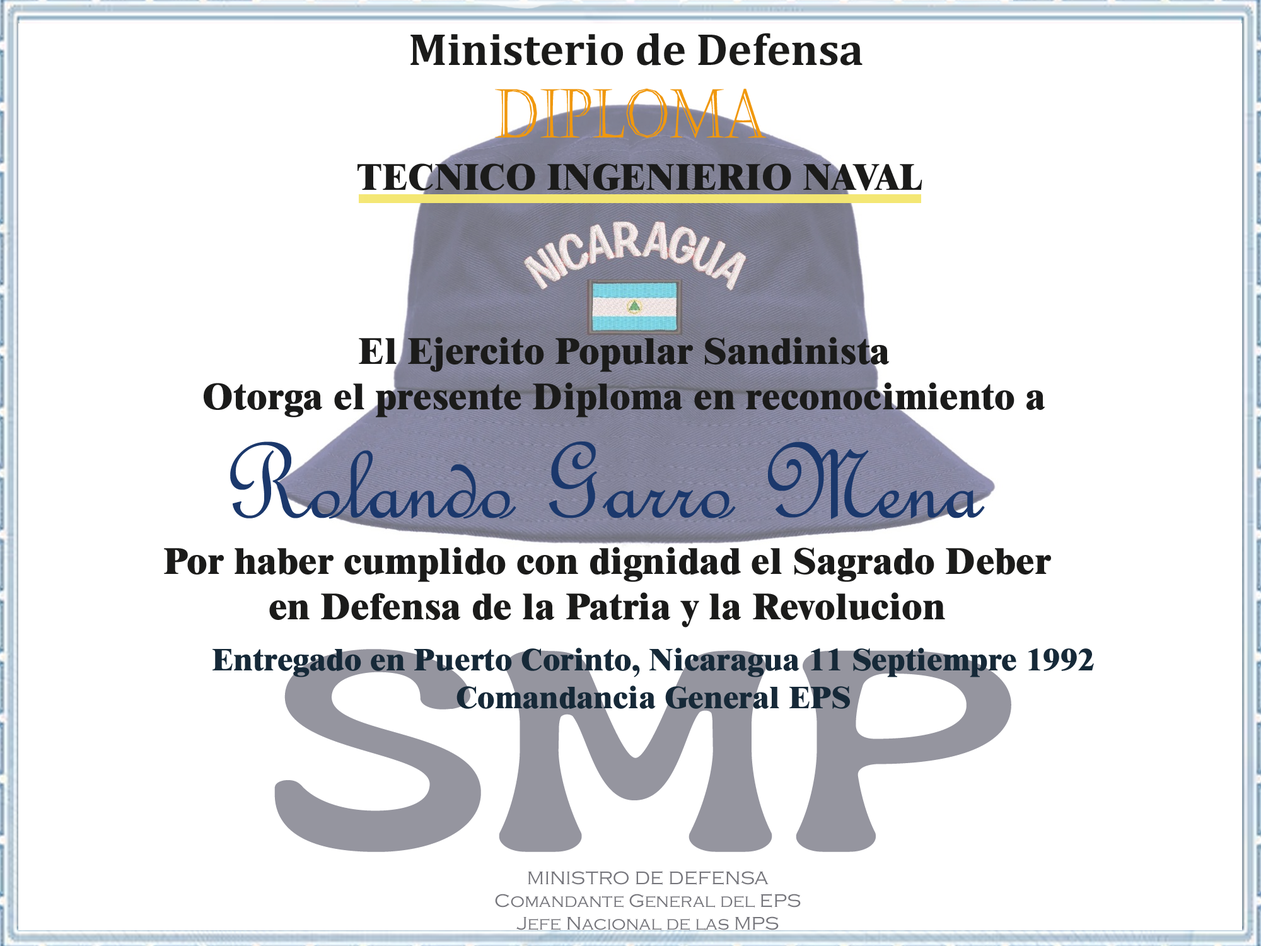
<style>
.page{position:relative;width:1261px;height:946px;background:#ffffff}
.page>*{position:absolute;margin:0}
.t1{font:45.4px "Cambria-Bold";color:#1b1b1a}
.t2{font:67.4px "Castellar";color:#f0980e;scale:0.77 1}
.t3{font:37.8px "Dutch801BT-ExtraBold";color:#1b1b1a}
.t4{font:114.9px "FrenchScriptMT";color:#1b386c}
.t5{font:31.7px "Dutch801BT-ExtraBold";color:#162938}
.t6{font:238.7px "FruitsDelight";color:#95959f;scale:1.7 1}
.t7{font:18.9px "CopperplateGothic-Light";color:#75757b}
</style>
<div class="page">
<p class="t1" style="left:410px;top:33px;width:452px;height:33px">Ministerio de Defensa</p>
<p class="t2" style="left:495px;top:88px;width:272px;height:50px">DIPLOMA</p>
<p class="t3" style="left:357px;top:163px;width:565px;height:27px">TECNICO INGENIERIO NAVAL</p>
<p class="t3" style="left:204px;top:337px;width:841px;height:80px;text-align:center">El Ejercito Popular Sandinista<br>Otorga el presente Diploma en reconocimiento a</p>
<p class="t4" style="left:230px;top:441px;width:755px;height:78px">Rolando Garro Mena</p>
<p class="t3" style="left:164px;top:547px;width:887px;height:80px;text-align:center">Por haber cumplido con dignidad el Sagrado Deber<br>en Defensa de la Patria y la Revolucion</p>
<p class="t5" style="left:212px;top:647px;width:882px;height:62px;text-align:center">Entregado en Puerto Corinto, Nicaragua 11 Septiempre 1992<br>Comandancia General EPS</p>
<p class="t6" style="left:274px;top:649px;width:737px;height:203px">SMP</p>
<p class="t7" style="left:495px;top:871px;width:306px;height:59px;text-align:center">MINISTRO DE DEFENSA<br>Comandante General del EPS<br>Jefe Nacional de las MPS</p>
</div>
